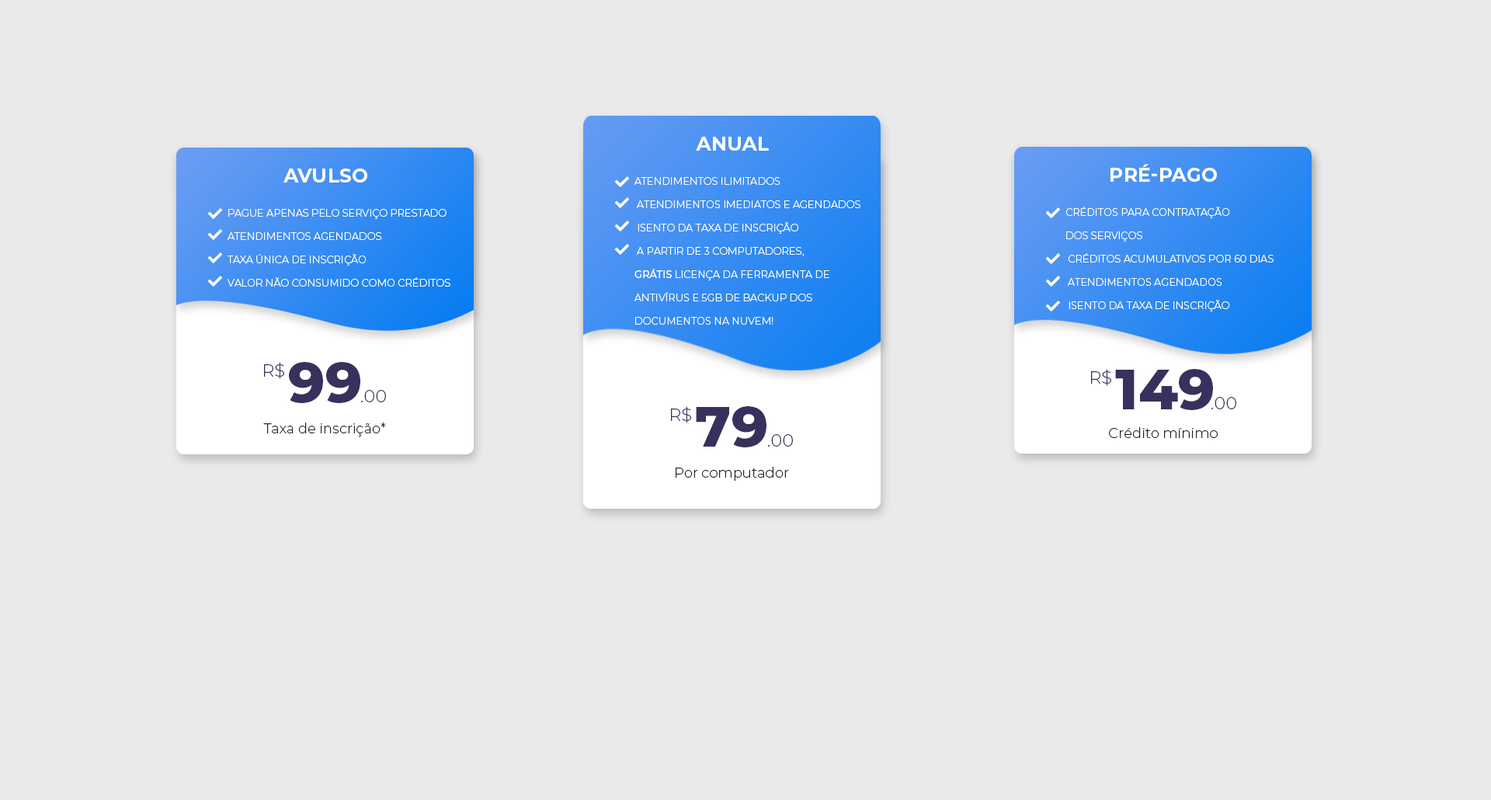
<style>
.page{position:relative;width:1491px;height:800px;background:#eaeaea}
.page>*{position:absolute;margin:0}
.t1{font:19.4px "Montserrat-Bold";color:#ffffff;text-transform:uppercase}
.t2{font:10.1px/23.3px "Montserrat-Light";color:#ffffff;text-transform:uppercase}
.t3{font:10.1px/23.3px "Montserrat-Medium";color:#ffffff;text-transform:uppercase}
.t4{font:17.3px "Montserrat-Light";color:#39305d;text-transform:uppercase}
.t5{font:56.9px "Montserrat-ExtraBold";color:#39305d;text-transform:uppercase}
.t6{font:14px "Montserrat-Light";color:#242424}
</style>
<div class="page">
<p class="t1" style="left:696px;top:137px;width:73px;height:14px">anual</p>
<p class="t1" style="left:283px;top:169px;width:84px;height:13px">Avulso</p>
<p class="t1" style="left:1110px;top:164px;width:107px;height:18px">pré-pago</p>
<p class="t2" style="left:634px;top:177px;width:226px;height:148px">Atendimentos ilimitados<br> Atendimentos imediatos e agendados<br> Isento da taxa de inscrição<br> A partir de 3 computadores, <br><span class="t3">GRÁTIS </span>licença da ferramenta de  <br>Antivírus e 5GB de backup dos <br>documentos na nuvem!</p>
<p class="t2" style="left:228px;top:209px;width:222px;height:78px">Pague apenas pelo serviço prestado<br>Atendimentos agendados<br>Taxa única de inscrição<br>Valor não consumido como créditos</p>
<p class="t2" style="left:1065px;top:207px;width:208px;height:104px">Créditos para contratação <br>dos serviços<br> Créditos acumulativos por 60 dias<br> Atendimentos agendados<br> Isento da taxa de inscrição</p>
<p class="t4" style="left:264px;top:362px;width:20px;height:17px">R$</p>
<p class="t5" style="left:289px;top:362px;width:71px;height:41px">99</p>
<p class="t4" style="left:1091px;top:369px;width:20px;height:17px">R$</p>
<p class="t5" style="left:1115px;top:369px;width:98px;height:41px">149</p>
<p class="t4" style="left:361px;top:390px;width:25px;height:12px">.00</p>
<p class="t4" style="left:1211px;top:397px;width:25px;height:12px">.00</p>
<p class="t4" style="left:671px;top:406px;width:20px;height:17px">R$</p>
<p class="t5" style="left:696px;top:406px;width:70px;height:41px">79</p>
<p class="t6" style="left:263px;top:422px;width:123px;height:14px">Taxa de inscrição*</p>
<p class="t4" style="left:768px;top:434px;width:25px;height:12px">.00</p>
<p class="t6" style="left:1109px;top:427px;width:109px;height:11px">Crédito mínimo</p>
<p class="t6" style="left:676px;top:467px;width:113px;height:14px">Por computador</p>
</div>
